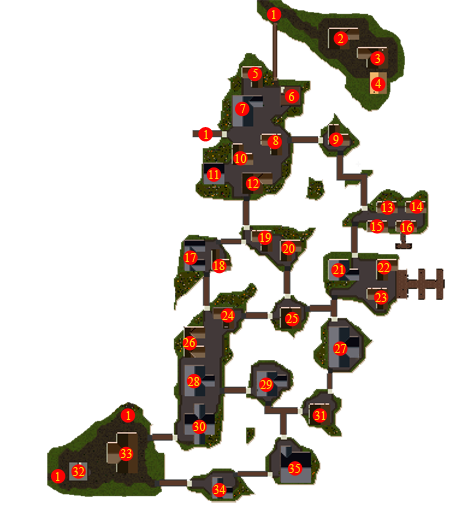
<style>
.page{position:relative;width:450px;height:507px;background:#ffffff}
.page>*{position:absolute;margin:0}
.t1{font:12px "TimesNewRomanPSMT";color:#fcd604}
</style>
<div class="page">
<p class="t1" style="left:272px;top:10px;width:4px;height:9px">1</p>
<p class="t1" style="left:337px;top:34px;width:7px;height:9px">2</p>
<p class="t1" style="left:375px;top:54px;width:6px;height:9px">3</p>
<p class="t1" style="left:253px;top:69px;width:5px;height:9px">5</p>
<p class="t1" style="left:375px;top:79px;width:6px;height:9px">4</p>
<p class="t1" style="left:289px;top:92px;width:6px;height:9px">6</p>
<p class="t1" style="left:240px;top:104px;width:6px;height:9px">7</p>
<p class="t1" style="left:204px;top:130px;width:4px;height:9px">1</p>
<p class="t1" style="left:273px;top:136px;width:6px;height:9px">8</p>
<p class="t1" style="left:333px;top:135px;width:6px;height:9px">9</p>
<p class="t1" style="left:235px;top:154px;width:12px;height:9px">10</p>
<p class="t1" style="left:209px;top:170px;width:10px;height:9px">11</p>
<p class="t1" style="left:248px;top:179px;width:11px;height:9px">12</p>
<p class="t1" style="left:382px;top:203px;width:11px;height:9px">13</p>
<p class="t1" style="left:412px;top:202px;width:11px;height:9px">14</p>
<p class="t1" style="left:371px;top:222px;width:11px;height:9px">15</p>
<p class="t1" style="left:260px;top:233px;width:11px;height:9px">19</p>
<p class="t1" style="left:401px;top:223px;width:12px;height:9px">16</p>
<p class="t1" style="left:282px;top:244px;width:13px;height:9px">20</p>
<p class="t1" style="left:185px;top:253px;width:11px;height:9px">17</p>
<p class="t1" style="left:214px;top:261px;width:11px;height:9px">18</p>
<p class="t1" style="left:333px;top:265px;width:11px;height:9px">21</p>
<p class="t1" style="left:378px;top:263px;width:12px;height:9px">22</p>
<p class="t1" style="left:375px;top:293px;width:12px;height:9px">23</p>
<p class="t1" style="left:222px;top:311px;width:12px;height:9px">24</p>
<p class="t1" style="left:286px;top:314px;width:12px;height:9px">25</p>
<p class="t1" style="left:183px;top:338px;width:12px;height:9px">26</p>
<p class="t1" style="left:334px;top:344px;width:12px;height:9px">27</p>
<p class="t1" style="left:187px;top:377px;width:13px;height:9px">28</p>
<p class="t1" style="left:260px;top:380px;width:12px;height:9px">29</p>
<p class="t1" style="left:126px;top:411px;width:5px;height:9px">1</p>
<p class="t1" style="left:314px;top:411px;width:12px;height:9px">31</p>
<p class="t1" style="left:193px;top:422px;width:13px;height:9px">30</p>
<p class="t1" style="left:120px;top:449px;width:12px;height:9px">33</p>
<p class="t1" style="left:56px;top:472px;width:4px;height:9px">1</p>
<p class="t1" style="left:73px;top:467px;width:12px;height:9px">32</p>
<p class="t1" style="left:289px;top:464px;width:11px;height:9px">35</p>
<p class="t1" style="left:213px;top:485px;width:13px;height:9px">34</p>
</div>
